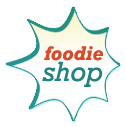
<style>
.page{position:relative;width:126px;height:127px;background:#ffffff}
.page>*{position:absolute;margin:0}
.t1{font:20px "Rockwell-BoldItalic";color:#d9492a}
.t2{font:28px "Rockwell-Italic";color:#228281}
</style>
<div class="page">
<p class="t1" style="left:44px;top:46px;width:59px;height:15px">foodie</p>
<p class="t2" style="left:42px;top:61px;width:61px;height:26px">shop</p>
</div>
